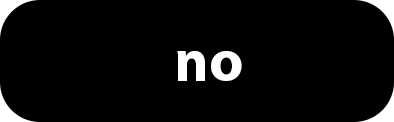
<style>
.page{position:relative;width:394px;height:122px;background:#000000}
.page>*{position:absolute;margin:0}
.t1{font:60px "MyriadPro-Bold";color:#ffffff}
</style>
<div class="page">
<p class="t1" style="left:177px;top:51px;width:65px;height:30px">no</p>
</div>
